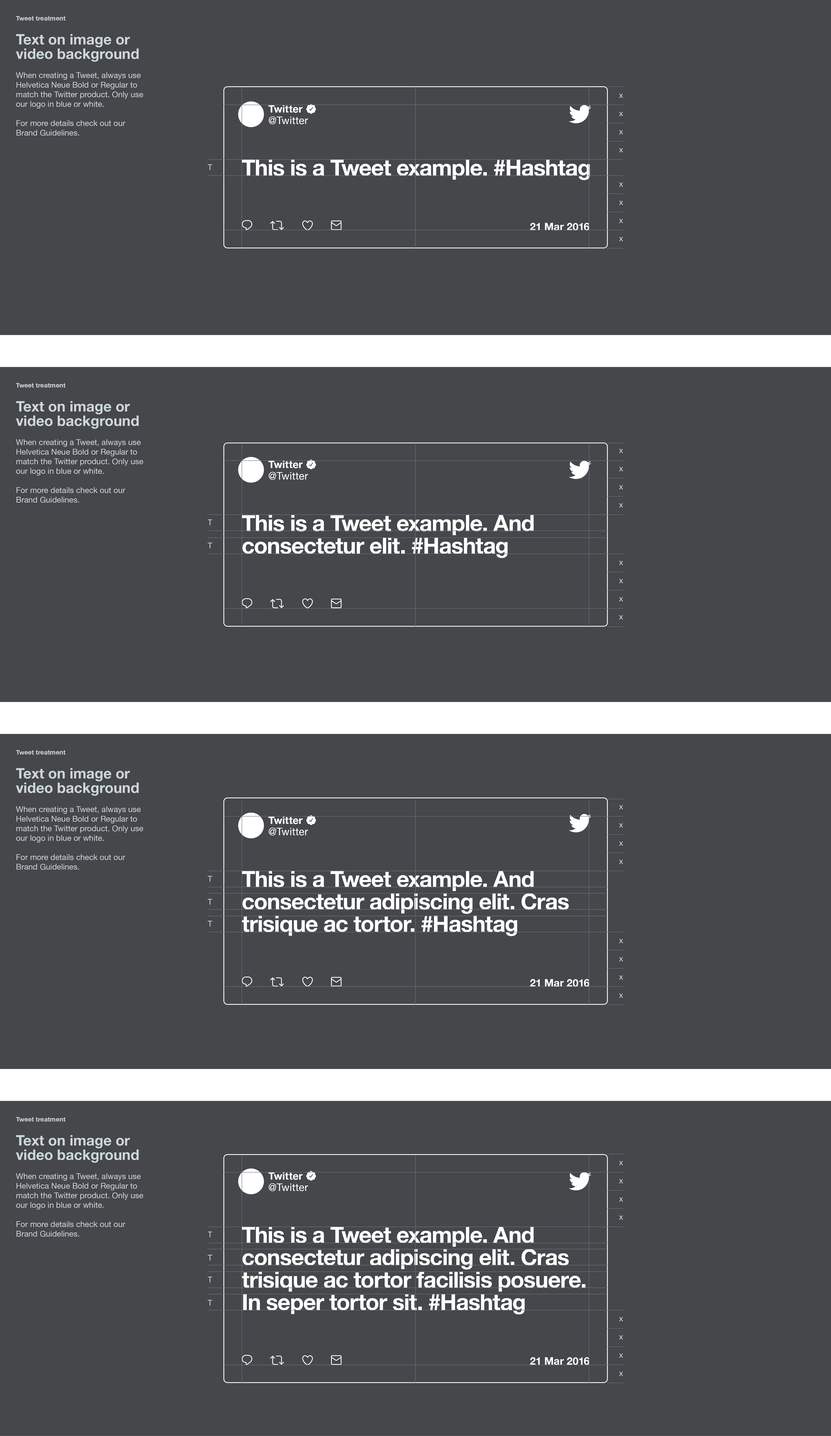
<style>
.page{position:relative;width:831px;height:1436px;background:#45474a}
.page>*{position:absolute;margin:0}
.t1{font:8px "HelveticaNeue";color:#ccd6dd}
.t2{font:6.4px/14.4px "HelveticaNeue-Bold";color:#ccd6dd}
.t3{font:14.4px/14.4px "HelveticaNeue-Bold";color:#ccd6dd}
.t4{font:10.4px "HelveticaNeue-Bold";color:#ffffff}
.t5{font:10.4px "HelveticaNeue";letter-spacing:0.015em;color:#ffffff}
.t6{font:22.4px "HelveticaNeue-Bold";letter-spacing:-0.025em;color:#ffffff}
.t7{font:22.4px/22.4px "HelveticaNeue-Bold";letter-spacing:-0.025em;color:#ffffff}
</style>
<div class="page">
<p class="t1" style="left:16px;top:16px;width:127px;height:120px"><span class="t2">Tweet treatment<br><br></span><span class="t3">Text on image or video background<br></span><br>When creating a Tweet, always use Helvetica Neue Bold or Regular to match the Twitter product. Only use our logo in blue or white.<br><br>For more details check out our<br>Brand Guidelines.</p>
<p class="t4" style="left:268px;top:105px;width:34px;height:8px">Twitter</p>
<p class="t5" style="left:269px;top:116px;width:39px;height:8px">@Twitter</p>
<p class="t6" style="left:242px;top:159px;width:348px;height:21px">This is a Tweet example. #Hashtag</p>
<p class="t4" style="left:530px;top:223px;width:59px;height:7px">21 Mar 2016</p>
<p class="t1" style="left:16px;top:383px;width:127px;height:120px"><span class="t2">Tweet treatment<br><br></span><span class="t3">Text on image or video background<br></span><br>When creating a Tweet, always use Helvetica Neue Bold or Regular to match the Twitter product. Only use our logo in blue or white.<br><br>For more details check out our<br>Brand Guidelines.</p>
<p class="t4" style="left:268px;top:461px;width:34px;height:7px">Twitter</p>
<p class="t5" style="left:269px;top:472px;width:39px;height:8px">@Twitter</p>
<p class="t7" style="left:242px;top:515px;width:291px;height:43px">This is a Tweet example. And<br>consectetur elit. #Hashtag</p>
<p class="t1" style="left:16px;top:750px;width:127px;height:120px"><span class="t2">Tweet treatment<br><br></span><span class="t3">Text on image or video background<br></span><br>When creating a Tweet, always use Helvetica Neue Bold or Regular to match the Twitter product. Only use our logo in blue or white.<br><br>For more details check out our<br>Brand Guidelines.</p>
<p class="t4" style="left:268px;top:816px;width:34px;height:8px">Twitter</p>
<p class="t5" style="left:269px;top:827px;width:39px;height:8px">@Twitter</p>
<p class="t7" style="left:242px;top:871px;width:327px;height:65px">This is a Tweet example. And<br>consectetur adipiscing elit. Cras <br>trisique ac tortor. #Hashtag</p>
<p class="t4" style="left:530px;top:979px;width:59px;height:7px">21 Mar 2016</p>
<p class="t1" style="left:16px;top:1117px;width:127px;height:119px"><span class="t2">Tweet treatment<br><br></span><span class="t3">Text on image or video background<br></span><br>When creating a Tweet, always use Helvetica Neue Bold or Regular to match the Twitter product. Only use our logo in blue or white.<br><br>For more details check out our<br>Brand Guidelines.</p>
<p class="t4" style="left:268px;top:1172px;width:34px;height:7px">Twitter</p>
<p class="t5" style="left:269px;top:1183px;width:39px;height:8px">@Twitter</p>
<p class="t7" style="left:242px;top:1226px;width:343px;height:88px">This is a Tweet example. And<br>consectetur adipiscing elit. Cras <br>trisique ac tortor facilisis posuere.<br>In seper tortor sit. #Hashtag</p>
<p class="t4" style="left:530px;top:1357px;width:59px;height:7px">21 Mar 2016</p>
</div>
